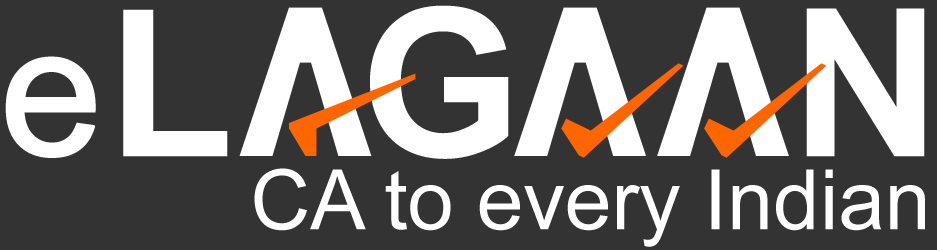
<style>
.page{position:relative;width:937px;height:250px;background:#333333}
.page>*{position:absolute;margin:0}
.t1{font:206.1px "Arial-BoldMT";letter-spacing:-0.05em;color:#ffffff}
.t2{font:183.2px "ArialMT";letter-spacing:-0.05em;color:#ffffff;font-weight:bold}
.t3{font:83.3px "ArialMT";color:#ffffff}
</style>
<div class="page">
<p class="t1" style="left:123px;top:5px;width:802px;height:154px">L   G      N</p>
<p class="t2" style="left:5px;top:56px;width:91px;height:102px">e</p>
<p class="t3" style="left:254px;top:168px;width:671px;height:79px">CA to every Indian</p>
</div>
